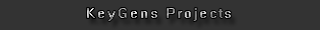
<style>
.page{position:relative;width:320px;height:30px;background:#333333}
.page>*{position:absolute;margin:0}
.t1{font:15px "System";letter-spacing:0.05em}
</style>
<div class="page">
<p class="t1" style="left:87px;top:8px;width:144px;height:13px">KeyGens Projects</p>
</div>
